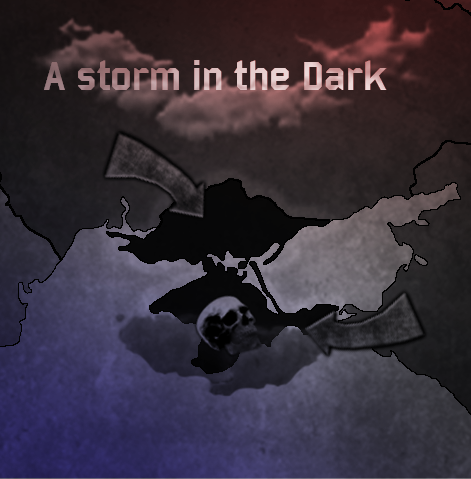
<style>
.page{position:relative;width:471px;height:479px}
.page>*{position:absolute;margin:0}
.t1{font:44px "Bombardier"}
</style>
<div class="page">
<p class="t1" style="left:44px;top:60px;width:343px;height:30px">A storm in the Dark</p>
</div>
